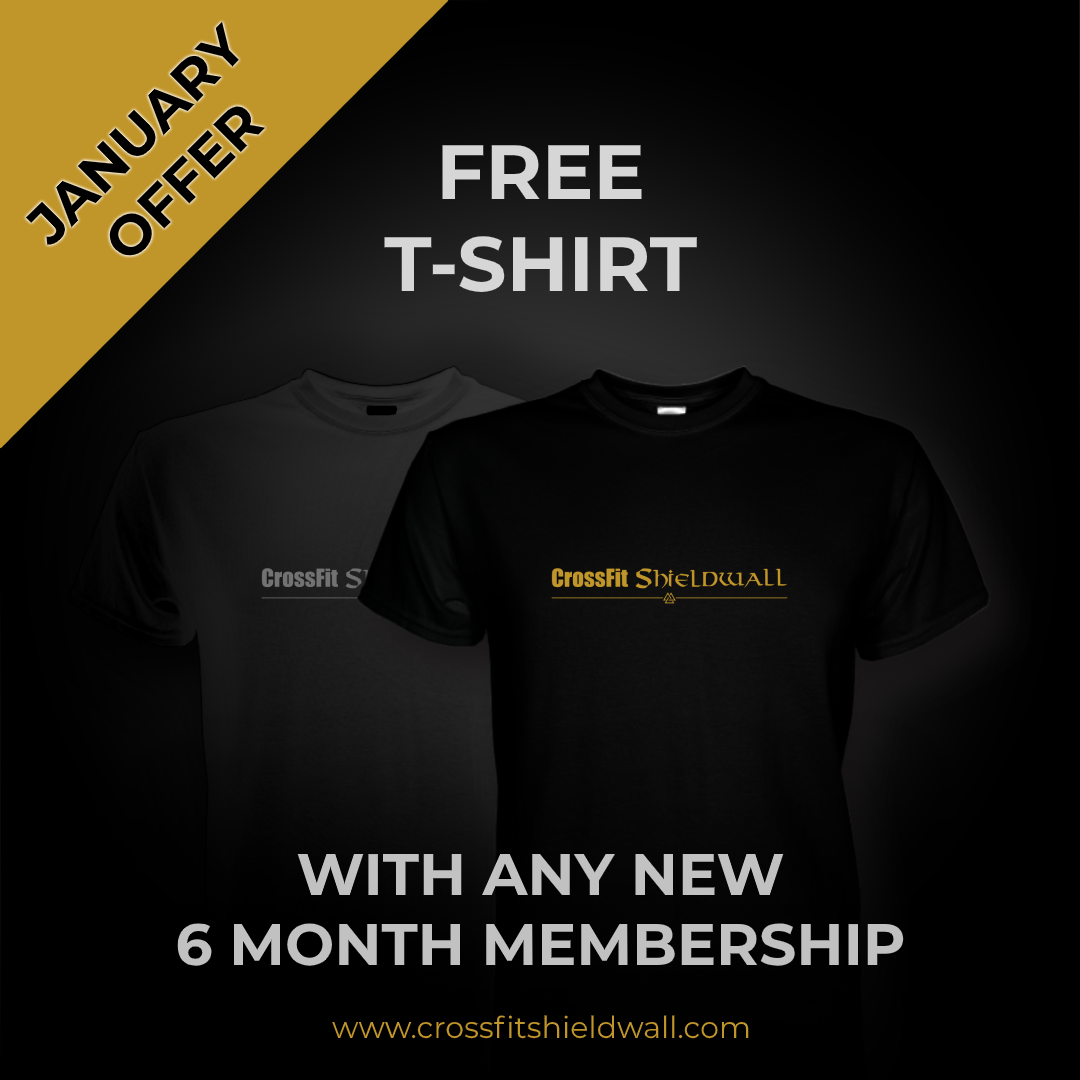
<style>
.page{position:relative;width:1080px;height:1080px;background:#000000}
.page>*{position:absolute;margin:0}
.t1{font:55.4px "Montserrat-Bold";color:#000000}
.t2{font:76.9px "Montserrat-Bold";color:#d6d6d6}
.t3{font:58.4px "Montserrat-Bold";color:#d6d6d6}
.t4{font:30.2px "Montserrat-Regular";color:#c09529}
</style>
<div class="page">
<p class="t1" style="left:26px;top:22px;width:239px;height:234px;text-align:center;rotate:-45deg">JANUARY<br>OFFER</p>
<p class="t2" style="left:384px;top:145px;width:313px;height:147px;text-align:center">FREE<br>T-SHIRT</p>
<p class="t3" style="left:177px;top:854px;width:727px;height:112px;text-align:center;opacity:0.9">WITH ANY NEW<br>6 MONTH MEMBERSHIP</p>
<p class="t4" style="left:332px;top:1015px;width:417px;height:24px">www.crossfitshieldwall.com</p>
</div>
